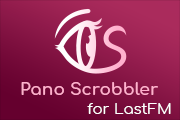
<style>
.page{position:relative;width:180px;height:120px}
.page>*{position:absolute;margin:0}
.t1{font:17px "Comfortaa-Bold";color:#ffb0cd}
.t2{font:15px "Comfortaa-Regular";color:#ffffff}
</style>
<div class="page">
<p class="t1" style="left:21px;top:82px;width:137px;height:13px">Pano Scrobbler</p>
<p class="t2" style="left:87px;top:103px;width:84px;height:11px">for LastFM</p>
</div>
